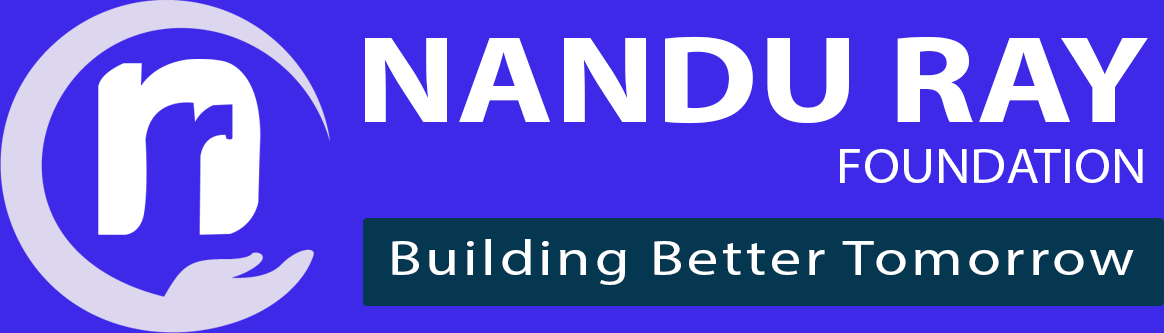
<style>
.page{position:relative;width:1164px;height:333px;background:#3d29e7}
.page>*{position:absolute;margin:0}
.t1{font:125px "MyriadPro-Bold";color:#ffffff;text-transform:uppercase;scale:1.18 1}
.t2{font:50px "MyriadPro-Regular";color:#ffffff;text-transform:uppercase;scale:1.08 1}
.t3{font:50px "MyriadPro-Regular";letter-spacing:0.06em;color:#ffffff;scale:1.24 1}
</style>
<div class="page">
<p class="t1" style="left:365px;top:36px;width:783px;height:88px">Nandu Ray</p>
<p class="t2" style="left:840px;top:149px;width:303px;height:34px">foundation</p>
<p class="t3" style="left:392px;top:239px;width:742px;height:46px">Building Better Tomorrow</p>
</div>
